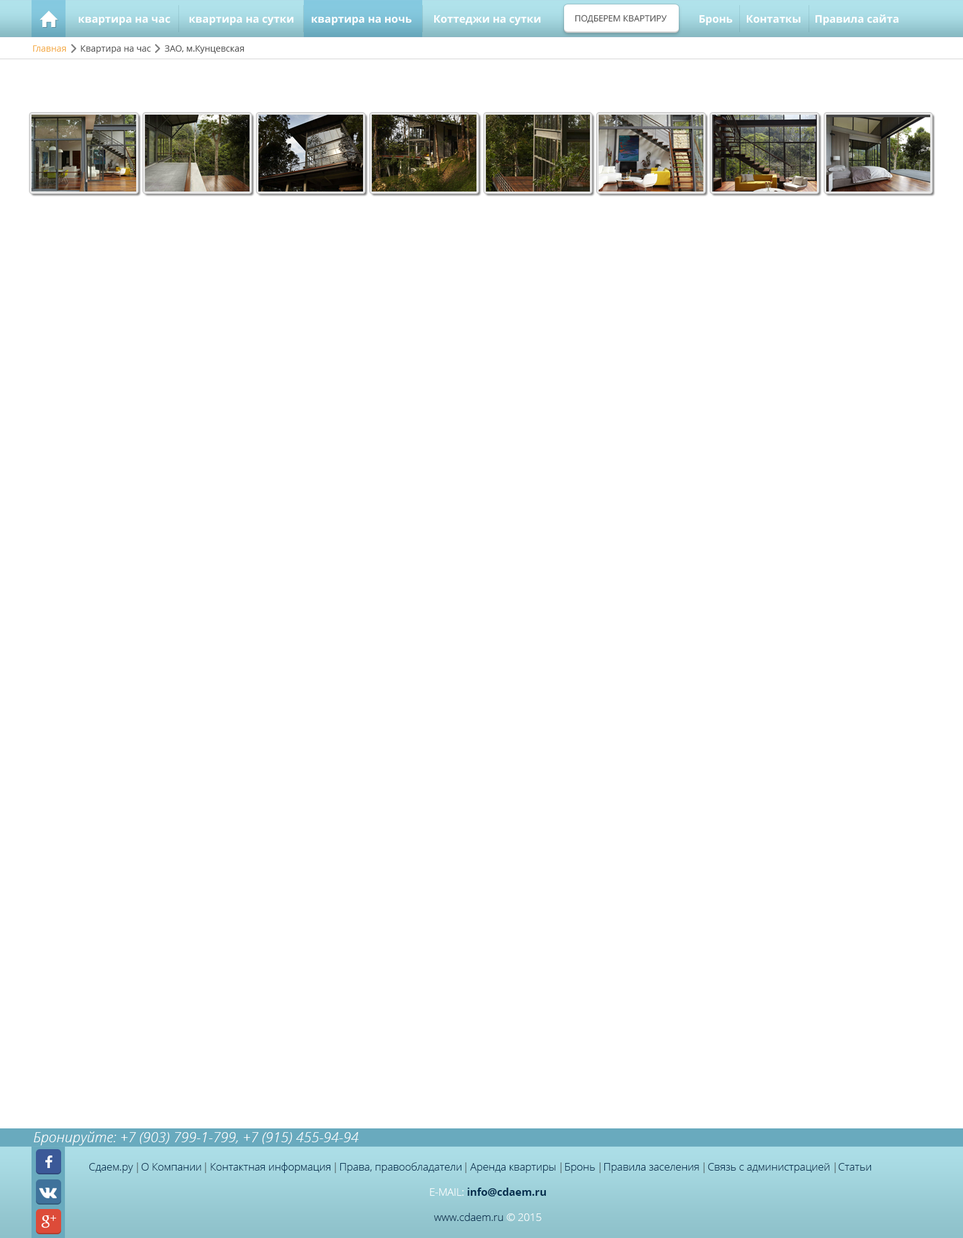
<style>
.page{position:relative;width:963px;height:1238px;background:#ffffff}
.page>*{position:absolute;margin:0}
.t1{font:10.5px "OpenSans-Bold";color:#ffffff}
.t2{font:8.7px "OpenSans";color:#595959;text-transform:uppercase}
.t3{font:8.8px "OpenSans";color:#595959}
.t4{font:8.8px "OpenSans";color:#f4ad49}
.t5{font:14px "OpenSansLight-Italic";color:#ffffff}
.t6{font:10.5px "OpenSans-Light";color:#002e4e}
.t7{font:10.5px "OpenSans-Light"}
.t8{font:10.5px "OpenSans-Bold";color:#002e4e}
.t9{font:17.5px "OpenSans-Bold";color:#ffffff}
.t10{font:10.5px "OpenSans-Light";color:#ffffff}
</style>
<div class="page">
<p class="t1" style="left:79px;top:16px;width:91px;height:9px">квартира на час</p>
<p class="t1" style="left:189px;top:16px;width:105px;height:9px">квартира на сутки</p>
<p class="t1" style="left:311px;top:16px;width:101px;height:9px">квартира на ночь</p>
<p class="t1" style="left:434px;top:15px;width:107px;height:10px">Коттеджи на сутки</p>
<p class="t2" style="left:575px;top:14px;width:92px;height:9px">подберем квартиру</p>
<p class="t1" style="left:700px;top:15px;width:32px;height:10px">Бронь</p>
<p class="t1" style="left:747px;top:15px;width:53px;height:8px">Контаткы</p>
<p class="t1" style="left:815px;top:14px;width:84px;height:11px">Правила сайта</p>
<p class="t3" style="left:33px;top:45px;width:211px;height:9px"><span class="t4">Главная      </span>Квартира на час      ЗАО, м.Кунцевская</p>
<p class="t5" style="left:33px;top:1132px;width:326px;height:14px">Бронируйте: +7 (903) 799-1-799, +7 (915) 455-94-94</p>
<p class="t6" style="left:89px;top:1163px;width:782px;height:10px">Сдаем.ру   О Компании   Контактная информация   Права, правообладатели   Аренда квартиры   Бронь   Правила заселения   Связь с администрацией   Статьи</p>
<p class="t7" style="left:137px;top:1163px;width:1px;height:10px">|</p>
<p class="t7" style="left:205px;top:1163px;width:1px;height:10px">|</p>
<p class="t7" style="left:335px;top:1163px;width:1px;height:10px">|</p>
<p class="t7" style="left:465px;top:1163px;width:1px;height:10px">|</p>
<p class="t7" style="left:560px;top:1163px;width:2px;height:10px">|</p>
<p class="t7" style="left:599px;top:1163px;width:2px;height:10px">|</p>
<p class="t7" style="left:703px;top:1163px;width:2px;height:10px">|</p>
<p class="t7" style="left:834px;top:1163px;width:2px;height:10px">|</p>
<p class="t8" style="left:430px;top:1188px;width:116px;height:33px;text-align:center"><span class="t9"><br></span><span class="t10"><br>E-MAIL: </span>info@cdaem.ru<br><span class="t6"><br>www.cdaem.ru </span><span class="t10">© 2015</span></p>
</div>
